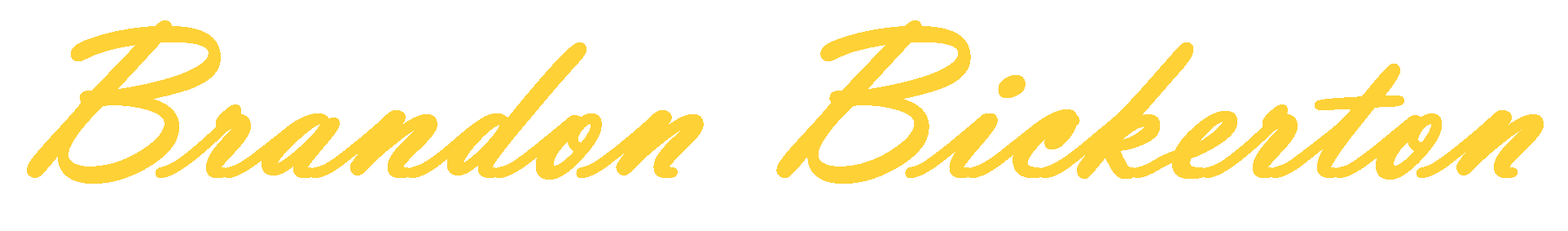
<style>
.page{position:relative;width:1568px;height:231px;background:#ffffff}
.page>*{position:absolute;margin:0}
.t1{font:217.2px "VladimirScript";color:#fed136;font-weight:bold}
</style>
<div class="page">
<p class="t1" style="left:27px;top:20px;width:1517px;height:163px">Brandon Bickerton</p>
</div>
